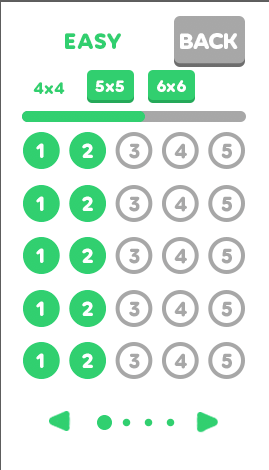
<style>
.page{position:relative;width:269px;height:470px;background:#ffffff}
.page>*{position:absolute;margin:0}
.t1{font:24px "VolteRounded-Bold";color:#31cf6f}
.t2{font:18px "VolteRounded-Bold";color:#31d06f}
.t3{font:18px "VolteRounded-Bold";color:#ffffff}
</style>
<div class="page">
<p class="t1" style="left:65px;top:33px;width:56px;height:16px">EASY</p>
<p class="t2" style="left:33px;top:82px;width:32px;height:12px">4x4</p>
<p class="t3" style="left:95px;top:80px;width:29px;height:12px">5x5</p>
<p class="t3" style="left:157px;top:80px;width:29px;height:12px">6x6</p>
</div>
